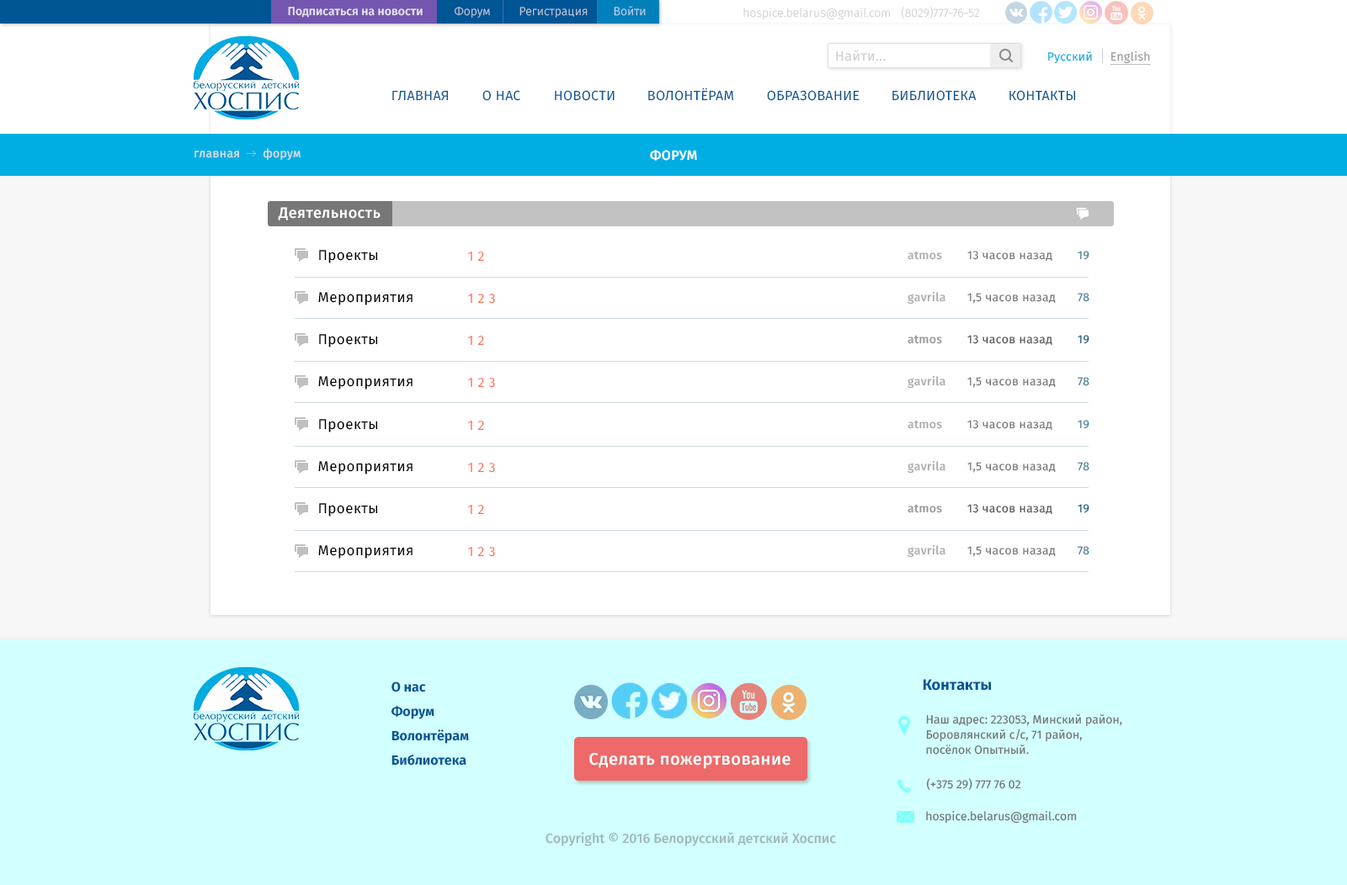
<style>
.page{position:relative;width:1347px;height:885px;background:#ffffff}
.page>*{position:absolute;margin:0}
.t1{font:11.8px "FiraSans-Light";color:#b8c6d9}
.t2{font:11.8px "FiraSans-Light";color:#b8d2e5}
.t3{font:11.8px "FiraSans-Medium";color:#e8e4f1}
.t4{font:11.8px "FiraSans-Light";color:#d1d1d1}
.t5{font:11.8px "FiraSans-Light"}
.t6{font:13.5px "FiraSans-Regular";letter-spacing:0.025em;color:#cdcdcd}
.t7{font:11.8px "FiraSans-Regular";letter-spacing:0.025em;color:#00ace1}
.t8{font:11.8px "FiraSans-Regular";letter-spacing:0.025em;color:#999999;text-decoration:underline}
.t9{font:13.5px "FiraSans-Regular";letter-spacing:0.025em;color:#095691;text-transform:uppercase}
.t10{font:11.8px "FiraSans-Regular";letter-spacing:0.025em;color:#e0dfdf}
.t11{font:13.5px "FiraSans-Medium";letter-spacing:0.025em;color:#ffffff;text-transform:uppercase}
.t12{font:15.2px "FiraSans-Medium";letter-spacing:0.025em;color:#ffffff}
.t13{font:14.3px "FiraSans-Regular";letter-spacing:0.025em;color:#000000}
.t14{font:13.5px "FiraSans-Regular";letter-spacing:0.025em;color:#ff724c}
.t15{font:11.8px "FiraSans-Medium";letter-spacing:0.025em;color:#999898}
.t16{font:11.8px "FiraSans-Regular";letter-spacing:0.025em;color:#767676}
.t17{font:11.8px "FiraSans-Regular";letter-spacing:0.025em;color:#337c92}
.t18{font:11.8px "FiraSans-Regular";letter-spacing:0.025em;color:#545454}
.t19{font:11.8px "FiraSans-Regular";letter-spacing:0.025em;color:#005b77}
.t20{font:13.5px "FiraSans-Bold";color:#005595}
.t21{font:15.2px "FiraSans-Bold";color:#005595}
.t22{font:11.8px/15.1px "FiraSans-Regular";color:#727272}
.t23{font:16.8px "FiraSans-Medium";letter-spacing:0.025em;color:#ffffff}
.t24{font:11.8px "FiraSans-Regular";color:#727272}
.t25{font:13.5px "FiraSans-Medium";color:#9fbaba}
</style>
<div class="page">
<p class="t1" style="left:455px;top:6px;width:35px;height:12px">Форум</p>
<p class="t2" style="left:614px;top:6px;width:32px;height:10px">Войти</p>
<p class="t3" style="left:288px;top:7px;width:135px;height:11px">Подписаться на новости</p>
<p class="t1" style="left:519px;top:7px;width:68px;height:11px">Регистрация</p>
<p class="t4" style="left:743px;top:8px;width:147px;height:11px">hospice.belarus@gmail.com</p>
<p class="t5" style="left:901px;top:7px;width:79px;height:12px">(8029)777-76-52</p>
<p class="t6" style="left:836px;top:50px;width:49px;height:11px">Найти...</p>
<p class="t7" style="left:1048px;top:51px;width:44px;height:13px">Русский</p>
<p class="t8" style="left:1109px;top:51px;width:42px;height:15px">English</p>
<p class="t9" style="left:648px;top:88px;width:86px;height:13px">Волонтёрам</p>
<p class="t9" style="left:392px;top:90px;width:57px;height:11px">Главная</p>
<p class="t9" style="left:482px;top:90px;width:38px;height:11px">о нас</p>
<p class="t9" style="left:555px;top:90px;width:59px;height:11px">новости</p>
<p class="t9" style="left:767px;top:90px;width:92px;height:11px">образование</p>
<p class="t9" style="left:892px;top:90px;width:84px;height:11px">Библиотека</p>
<p class="t9" style="left:1009px;top:90px;width:67px;height:11px">КОнтакты</p>
<p class="t10" style="left:263px;top:148px;width:37px;height:13px">форум</p>
<p class="t11" style="left:650px;top:150px;width:47px;height:11px">форум</p>
<p class="t10" style="left:194px;top:151px;width:45px;height:7px">главная</p>
<p class="t12" style="left:278px;top:207px;width:102px;height:14px">Деятельность</p>
<p class="t13" style="left:319px;top:250px;width:59px;height:13px">Проекты</p>
<p class="t14" style="left:468px;top:252px;width:4px;height:9px">1</p>
<p class="t14" style="left:477px;top:252px;width:7px;height:10px">2</p>
<p class="t15" style="left:907px;top:251px;width:35px;height:9px">atmos</p>
<p class="t16" style="left:967px;top:251px;width:85px;height:11px">13 часов назад</p>
<p class="t17" style="left:1077px;top:251px;width:12px;height:9px">19</p>
<p class="t13" style="left:318px;top:292px;width:94px;height:14px">Мероприятия</p>
<p class="t14" style="left:468px;top:294px;width:4px;height:9px">1</p>
<p class="t14" style="left:477px;top:294px;width:7px;height:10px">2</p>
<p class="t14" style="left:488px;top:294px;width:7px;height:10px">3</p>
<p class="t15" style="left:907px;top:291px;width:38px;height:14px">gavrila</p>
<p class="t16" style="left:967px;top:293px;width:88px;height:11px">1,5 часов назад</p>
<p class="t17" style="left:1077px;top:293px;width:12px;height:9px">78</p>
<p class="t13" style="left:319px;top:334px;width:59px;height:14px">Проекты</p>
<p class="t14" style="left:468px;top:336px;width:4px;height:9px">1</p>
<p class="t14" style="left:477px;top:336px;width:7px;height:10px">2</p>
<p class="t15" style="left:907px;top:335px;width:35px;height:9px">atmos</p>
<p class="t18" style="left:967px;top:335px;width:85px;height:11px">13 часов назад</p>
<p class="t19" style="left:1077px;top:335px;width:12px;height:9px">19</p>
<p class="t13" style="left:318px;top:376px;width:94px;height:14px">Мероприятия</p>
<p class="t14" style="left:468px;top:378px;width:4px;height:9px">1</p>
<p class="t14" style="left:477px;top:378px;width:7px;height:10px">2</p>
<p class="t14" style="left:488px;top:378px;width:7px;height:10px">3</p>
<p class="t15" style="left:907px;top:375px;width:38px;height:14px">gavrila</p>
<p class="t16" style="left:967px;top:377px;width:88px;height:11px">1,5 часов назад</p>
<p class="t17" style="left:1077px;top:377px;width:12px;height:9px">78</p>
<p class="t13" style="left:319px;top:419px;width:59px;height:14px">Проекты</p>
<p class="t14" style="left:468px;top:421px;width:4px;height:9px">1</p>
<p class="t14" style="left:477px;top:421px;width:7px;height:10px">2</p>
<p class="t15" style="left:907px;top:420px;width:35px;height:9px">atmos</p>
<p class="t16" style="left:967px;top:420px;width:85px;height:11px">13 часов назад</p>
<p class="t17" style="left:1077px;top:420px;width:12px;height:9px">19</p>
<p class="t13" style="left:318px;top:461px;width:94px;height:14px">Мероприятия</p>
<p class="t15" style="left:907px;top:460px;width:38px;height:14px">gavrila</p>
<p class="t14" style="left:468px;top:463px;width:4px;height:9px">1</p>
<p class="t14" style="left:477px;top:463px;width:7px;height:10px">2</p>
<p class="t14" style="left:488px;top:463px;width:7px;height:10px">3</p>
<p class="t16" style="left:967px;top:462px;width:88px;height:11px">1,5 часов назад</p>
<p class="t17" style="left:1077px;top:462px;width:12px;height:9px">78</p>
<p class="t13" style="left:319px;top:503px;width:59px;height:14px">Проекты</p>
<p class="t14" style="left:468px;top:505px;width:4px;height:9px">1</p>
<p class="t14" style="left:477px;top:505px;width:7px;height:10px">2</p>
<p class="t15" style="left:907px;top:504px;width:35px;height:9px">atmos</p>
<p class="t18" style="left:967px;top:504px;width:85px;height:11px">13 часов назад</p>
<p class="t19" style="left:1077px;top:504px;width:12px;height:9px">19</p>
<p class="t13" style="left:318px;top:545px;width:94px;height:14px">Мероприятия</p>
<p class="t15" style="left:907px;top:545px;width:38px;height:13px">gavrila</p>
<p class="t14" style="left:468px;top:547px;width:4px;height:9px">1</p>
<p class="t14" style="left:477px;top:547px;width:7px;height:10px">2</p>
<p class="t14" style="left:488px;top:547px;width:7px;height:10px">3</p>
<p class="t16" style="left:967px;top:546px;width:88px;height:11px">1,5 часов назад</p>
<p class="t17" style="left:1077px;top:546px;width:12px;height:10px">78</p>
<p class="t20" style="left:391px;top:682px;width:35px;height:11px">О нас</p>
<p class="t21" style="left:923px;top:679px;width:68px;height:12px">Контакты</p>
<p class="t20" style="left:391px;top:706px;width:43px;height:14px">Форум</p>
<p class="t22" style="left:926px;top:715px;width:196px;height:40px">Наш адрес: 223053, Минский район,<br>Боровлянский с/c, 71 район, <br>посёлок Опытный.</p>
<p class="t20" style="left:391px;top:730px;width:78px;height:14px">Волонтёрам</p>
<p class="t20" style="left:391px;top:755px;width:75px;height:11px">Библиотека</p>
<p class="t23" style="left:589px;top:753px;width:201px;height:16px">Сделать пожертвование</p>
<p class="t24" style="left:926px;top:779px;width:95px;height:12px">(+375 29) 777 76 02</p>
<p class="t24" style="left:926px;top:811px;width:151px;height:13px">hospice.belarus@gmail.com</p>
<p class="t25" style="left:545px;top:832px;width:291px;height:15px">Copyright © 2016 Белорусский детский Хоспис</p>
</div>
